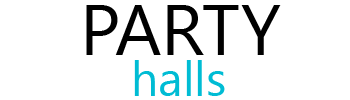
<style>
.page{position:relative;width:350px;height:100px;background:#ffffff}
.page>*{position:absolute;margin:0}
.t1{font:72px "KhmerUI";color:#000000}
.t2{font:48px "KhmerUI";color:#00bcd4}
</style>
<div class="page">
<p class="t1" style="left:86px;top:5px;width:195px;height:50px">PARTY</p>
<p class="t2" style="left:134px;top:60px;width:91px;height:36px">halls</p>
</div>
